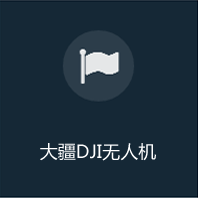
<style>
.page{position:relative;width:198px;height:198px;background:#152836}
.page>*{position:absolute;margin:0}
.t1{font:18.1px "MicrosoftYaHei";color:#ffffff}
</style>
<div class="page">
<p class="t1" style="left:40px;top:143px;width:116px;height:18px">大疆DJI无人机</p>
</div>
